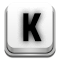
<style>
.page{position:relative;width:60px;height:60px;background:#ffffff}
.page>*{position:absolute;margin:0}
.t1{font:37.9px "Trender";letter-spacing:-0.06em;color:#000000;scale:0.79 1}
</style>
<div class="page">
<p class="t1" style="left:23px;top:13px;width:19px;height:29px">k</p>
</div>
